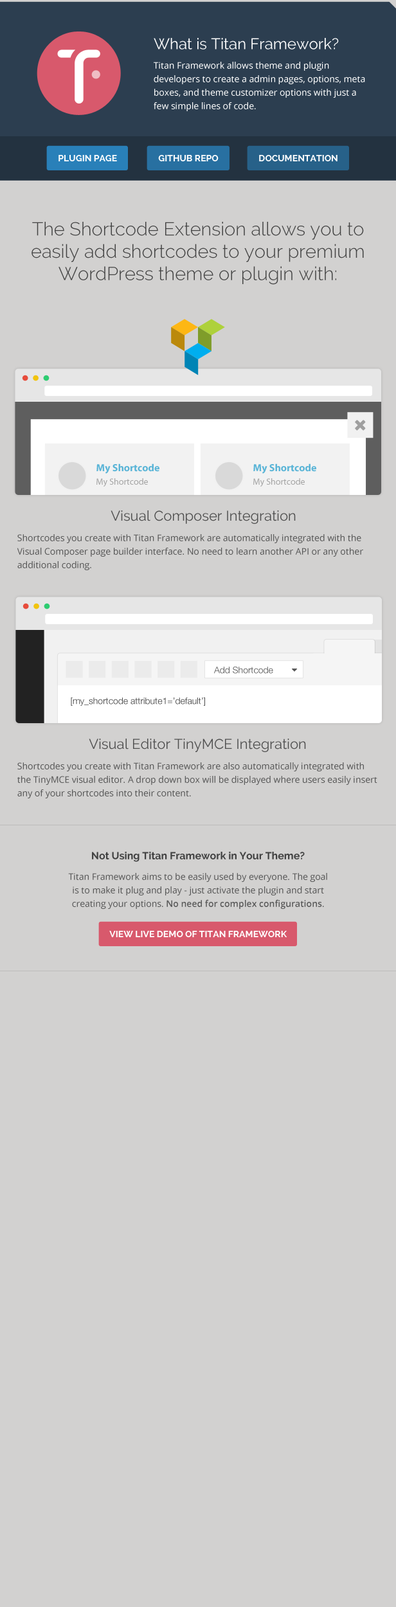
<style>
.page{position:relative;width:396px;height:1607px;background:#d2d1d0}
.page>*{position:absolute;margin:0}
.t1{font:15.4px "Raleway-Regular";color:#ffffff}
.t2{font:9px/13.5px "OpenSans";color:#ffffff}
.t3{font:9px "Raleway-Bold";color:#ffffff;text-transform:uppercase}
.t4{font:18.6px "Raleway-Light";color:#424242}
.t5{font:10.3px "MyriadPro-Bold";color:#5bb5d7}
.t6{font:9px "MyriadPro-Regular";color:#a4a4a4}
.t7{font:14.1px "Raleway-Regular";color:#4e4e4e}
.t8{font:9px/13.5px "OpenSans";color:#585858}
.t9{font:9px "HelveticaNeue-Light";color:#595959}
.t10{font:9px "HelveticaNeue-Light";color:#484848}
.t11{font:10.3px "Raleway-Bold";color:#424242}
.t12{font:9px/13.5px "OpenSans-Semibold";color:#585858}
</style>
<div class="page">
<p class="t1" style="left:154px;top:38px;width:185px;height:12px">What is Titan Framework?</p>
<p class="t2" style="left:154px;top:62px;width:211px;height:49px">Titan Framework allows theme and plugin developers to create a admin pages, options, meta boxes, and theme customizer options with just a few simple lines of code.</p>
<p class="t3" style="left:59px;top:155px;width:58px;height:6px">Plugin page</p>
<p class="t3" style="left:158px;top:155px;width:61px;height:6px">GitHub Repo</p>
<p class="t3" style="left:259px;top:155px;width:79px;height:6px">documentation</p>
<p class="t4" style="left:32px;top:222px;width:332px;height:63px;text-align:center">The Shortcode Extension allows you to easily add shortcodes to your premium WordPress theme or plugin with:</p>
<p class="t5" style="left:96px;top:464px;width:63px;height:10px">My Shortcode</p>
<p class="t5" style="left:253px;top:464px;width:63px;height:10px">My Shortcode</p>
<p class="t6" style="left:96px;top:478px;width:52px;height:9px">My Shortcode</p>
<p class="t6" style="left:253px;top:478px;width:52px;height:9px">My Shortcode</p>
<p class="t7" style="left:111px;top:510px;width:185px;height:14px">Visual Composer Integration</p>
<p class="t8" style="left:17px;top:534px;width:346px;height:36px">Shortcodes you create with Titan Framework are automatically integrated with the Visual Composer page builder interface. No need to learn another API or any other additional coding.</p>
<p class="t9" style="left:214px;top:667px;width:59px;height:7px">Add Shortcode</p>
<p class="t10" style="left:71px;top:698px;width:134px;height:8px">[my_shortcode attribute1=’default’]</p>
<p class="t7" style="left:89px;top:739px;width:217px;height:13px">Visual Editor TinyMCE Integration</p>
<p class="t8" style="left:17px;top:762px;width:360px;height:36px">Shortcodes you create with Titan Framework are also automatically integrated with the TinyMCE visual editor. A drop down box will be displayed where users easily insert any of your shortcodes into their content.</p>
<p class="t11" style="left:92px;top:852px;width:213px;height:10px">Not Using Titan Framework in Your Theme?</p>
<p class="t8" style="left:68px;top:873px;width:259px;height:36px;text-align:center">Titan Framework aims to be easily used by everyone. The goal is to make it plug and play - just activate the plugin and start creating your options. <span class="t12">No need for complex configurations</span>.</p>
<p class="t3" style="left:109px;top:931px;width:178px;height:6px">view live demo of titan framework</p>
</div>
